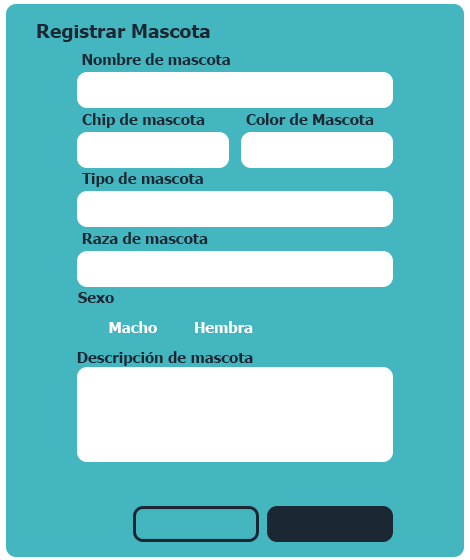
<style>
.page{position:relative;width:470px;height:560px;background:#44b6c0}
.page>*{position:absolute;margin:0}
.t1{font:19.2px "Tahoma-Bold";color:#1b2733}
.t2{font:14.8px "Tahoma-Bold";color:#1b2733}
.t3{font:14.8px "Tahoma-Bold";color:#ffffff}
</style>
<div class="page">
<p class="t1" style="left:37px;top:24px;width:173px;height:18px">Registrar Mascota</p>
<p class="t2" style="left:82px;top:53px;width:148px;height:12px">Nombre de mascota</p>
<p class="t2" style="left:82px;top:113px;width:123px;height:15px">Chip de mascota</p>
<p class="t2" style="left:246px;top:113px;width:128px;height:12px">Color de Mascota</p>
<p class="t2" style="left:82px;top:172px;width:121px;height:15px">Tipo de mascota</p>
<p class="t2" style="left:82px;top:232px;width:126px;height:12px">Raza de mascota</p>
<p class="t2" style="left:78px;top:292px;width:36px;height:11px">Sexo</p>
<p class="t3" style="left:109px;top:321px;width:48px;height:12px">Macho</p>
<p class="t3" style="left:195px;top:321px;width:58px;height:12px">Hembra</p>
<p class="t2" style="left:77px;top:351px;width:176px;height:15px">Descripción de mascota</p>
</div>
